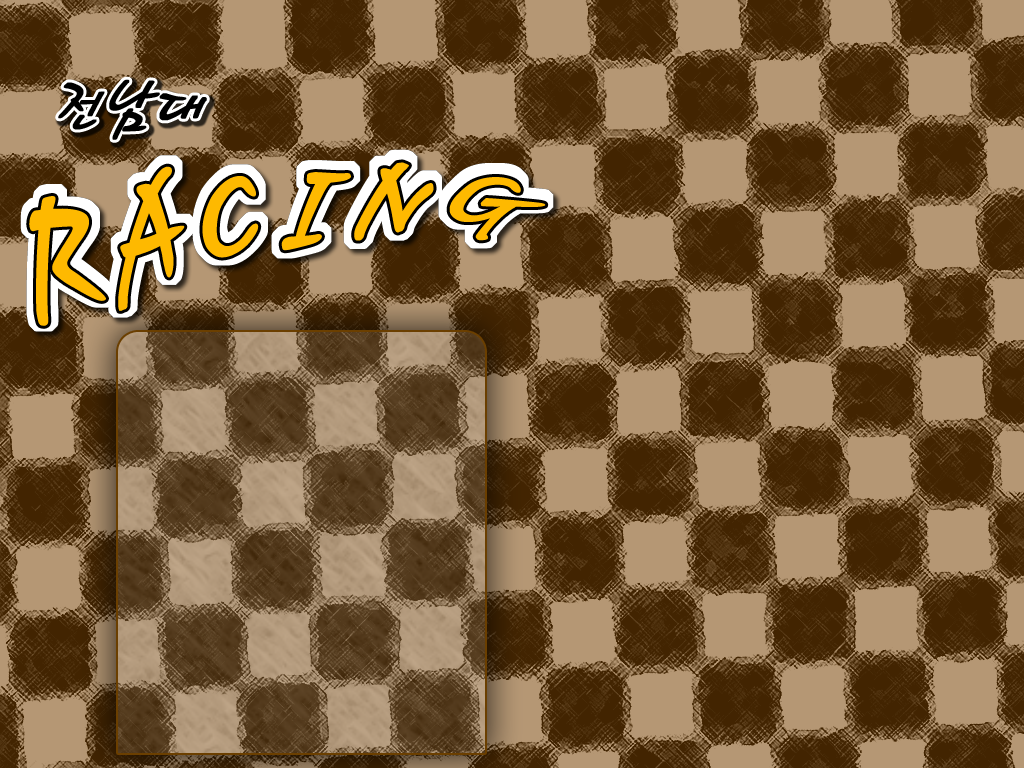
<style>
.page{position:relative;width:1024px;height:768px;background:#b59774}
.page>*{position:absolute;margin:0}
.t1{font:83.6px "HaanCjaM";color:#000000;font-weight:bold;scale:0.91 1}
.t2{font:200.2px "HaanCjaB";color:#feb900;scale:0.91 1}
</style>
<div class="page">
<p class="t1" style="left:58px;top:79px;width:149px;height:61px">전남대</p>
<p class="t2" style="left:29px;top:162px;width:517px;height:164px;rotate:-9deg">RACING</p>
</div>
